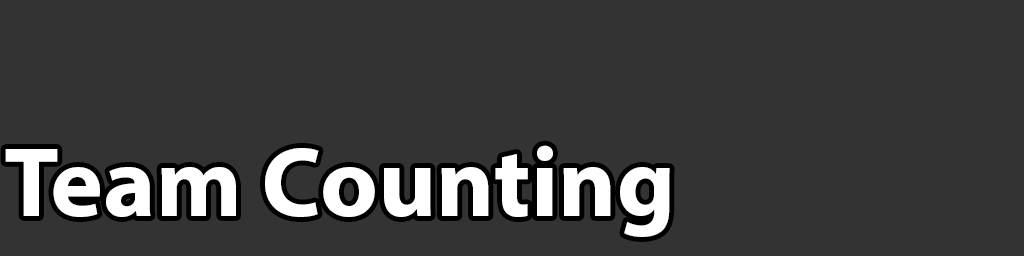
<style>
.page{position:relative;width:1024px;height:256px;background:#333333}
.page>*{position:absolute;margin:0}
.t1{font:100px "MyriadPro-Bold";color:#ffffff}
</style>
<div class="page">
<p class="t1" style="left:5px;top:145px;width:665px;height:92px">Team Counting</p>
</div>
